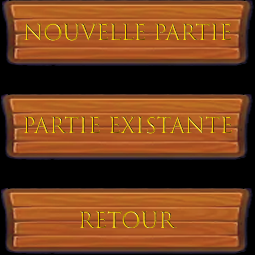
<style>
.page{position:relative;width:255px;height:255px;background:#000000}
.page>*{position:absolute;margin:0}
.t1{font:21.2px "TrajanColor-Concept"}
</style>
<div class="page">
<p class="t1" style="left:24px;top:23px;width:207px;height:18px">Nouvelle Partie</p>
<p class="t1" style="left:24px;top:116px;width:208px;height:18px">Partie Existante</p>
<p class="t1" style="left:80px;top:211px;width:97px;height:18px">Retour</p>
</div>
